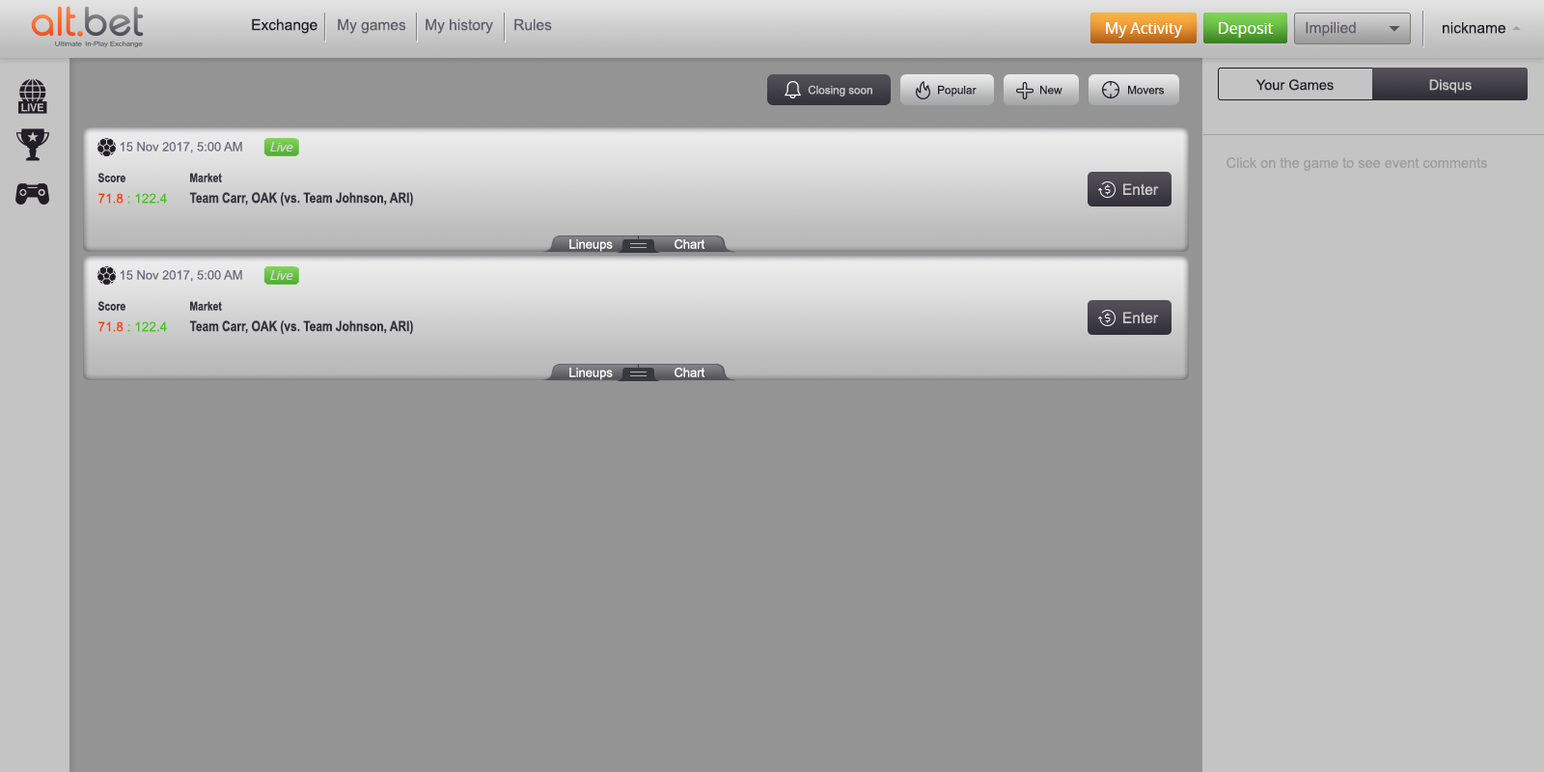
<style>
.page{position:relative;width:1544px;height:772px;background:#949494}
.page>*{position:absolute;margin:0}
.t1{font:11.4px "ArialMT";color:#211e25}
.t2{font:11.4px "ArialMT";color:#625d69}
.t3{font:11.4px "ArialMT";color:#c6c6c6}
.t4{font:14.2px "ArialMT";color:#211e25}
.t5{font:14.2px "ArialMT";color:#c6c6c6}
.t6{font:12.6px "ArialMT";color:#6e6c7e}
.t7{font:14.2px "ArialMT";color:#9e9e9e}
.t8{font:12.3px "ArialNarrow-Bold";color:#35343c}
.t9{font:15.1px "ArialMT";color:#c6c6c6}
.t10{font:13.2px "ArialMT";color:#48c221}
.t11{font:13.2px "ArialMT";color:#ff3c00}
.t12{font:14.2px "ArialNarrow-Bold";color:#35333e}
.t13{font:12.6px "ArialMT";color:#ffffff}
</style>
<div class="page">
<p class="t1" style="left:252px;top:18px;width:66px;height:16px">Exchange</p>
<p class="t2" style="left:338px;top:18px;width:68px;height:16px">My games</p>
<p class="t2" style="left:426px;top:18px;width:67px;height:16px">My history</p>
<p class="t2" style="left:514px;top:18px;width:38px;height:13px">Rules</p>
<p class="t2" style="left:1306px;top:21px;width:50px;height:16px">Impilied</p>
<p class="t1" style="left:1443px;top:22px;width:63px;height:12px">nickname</p>
<p class="t3" style="left:808px;top:85px;width:65px;height:12px">Closing soon</p>
<p class="t1" style="left:938px;top:85px;width:39px;height:12px">Popular</p>
<p class="t1" style="left:1040px;top:85px;width:23px;height:10px">New</p>
<p class="t1" style="left:1128px;top:85px;width:36px;height:10px">Movers</p>
<p class="t4" style="left:1256px;top:79px;width:78px;height:12px">Your Games</p>
<p class="t5" style="left:1429px;top:79px;width:43px;height:15px">Disqus</p>
<p class="t6" style="left:120px;top:142px;width:122px;height:11px">15 Nov 2017, 5:00 AM</p>
<p class="t7" style="left:1227px;top:157px;width:260px;height:14px">Click on the game to see event comments</p>
<p class="t8" style="left:97px;top:173px;width:28px;height:9px">Score</p>
<p class="t8" style="left:190px;top:173px;width:32px;height:9px">Market</p>
<p class="t9" style="left:1123px;top:183px;width:36px;height:12px">Enter</p>
<p class="t10" style="left:98px;top:193px;width:69px;height:11px"><span class="t11">71.8 </span>: 122.4</p>
<p class="t12" style="left:189px;top:192px;width:224px;height:15px">Team Carr, OAK (vs. Team Johnson, ARI)</p>
<p class="t13" style="left:569px;top:239px;width:44px;height:13px">Lineups</p>
<p class="t13" style="left:675px;top:239px;width:31px;height:10px">Chart</p>
<p class="t6" style="left:120px;top:270px;width:122px;height:12px">15 Nov 2017, 5:00 AM</p>
<p class="t8" style="left:97px;top:301px;width:28px;height:10px">Score</p>
<p class="t8" style="left:190px;top:301px;width:32px;height:10px">Market</p>
<p class="t9" style="left:1123px;top:312px;width:36px;height:11px">Enter</p>
<p class="t10" style="left:98px;top:321px;width:69px;height:11px"><span class="t11">71.8 </span>: 122.4</p>
<p class="t12" style="left:189px;top:320px;width:224px;height:15px">Team Carr, OAK (vs. Team Johnson, ARI)</p>
<p class="t13" style="left:569px;top:368px;width:44px;height:12px">Lineups</p>
<p class="t13" style="left:675px;top:368px;width:31px;height:9px">Chart</p>
</div>
